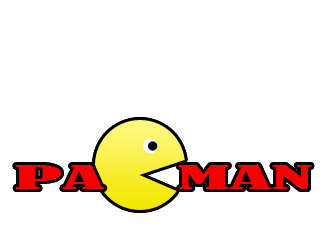
<style>
.page{position:relative;width:320px;height:240px;background:#ffffff}
.page>*{position:absolute;margin:0}
.t1{font:30px "BernardMT-Condensed";color:#ff0000;scale:3 1}
</style>
<div class="page">
<p class="t1" style="left:15px;top:165px;width:90px;height:24px">PA</p>
<p class="t1" style="left:178px;top:165px;width:134px;height:24px">MAN</p>
</div>
